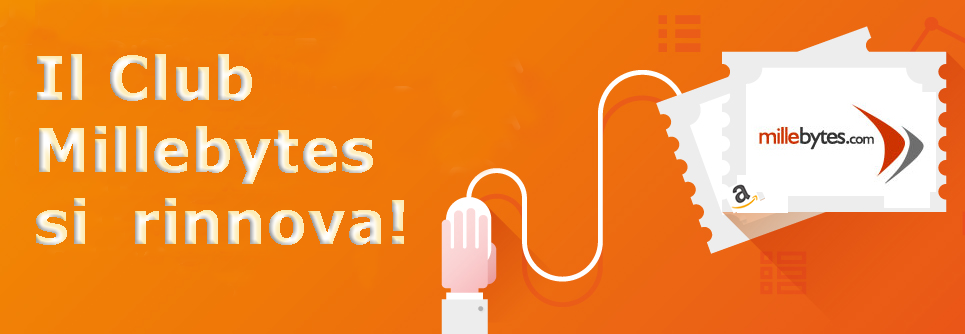
<style>
.page{position:relative;width:965px;height:334px}
.page>*{position:absolute;margin:0}
.t1{font:60px "Verdana-Bold"}
</style>
<div class="page">
<p class="t1" style="left:36px;top:54px;width:368px;height:191px">Il Club <br>Millebytes <br>si  rinnova!</p>
</div>
